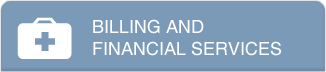
<style>
.page{position:relative;width:326px;height:72px;background:#7b9ab8}
.page>*{position:absolute;margin:0}
.t1{font:18px "Helvetica";color:#ffffff;text-transform:uppercase}
</style>
<div class="page">
<p class="t1" style="left:93px;top:19px;width:188px;height:37px">Billing AND<br>Financial Services</p>
</div>
